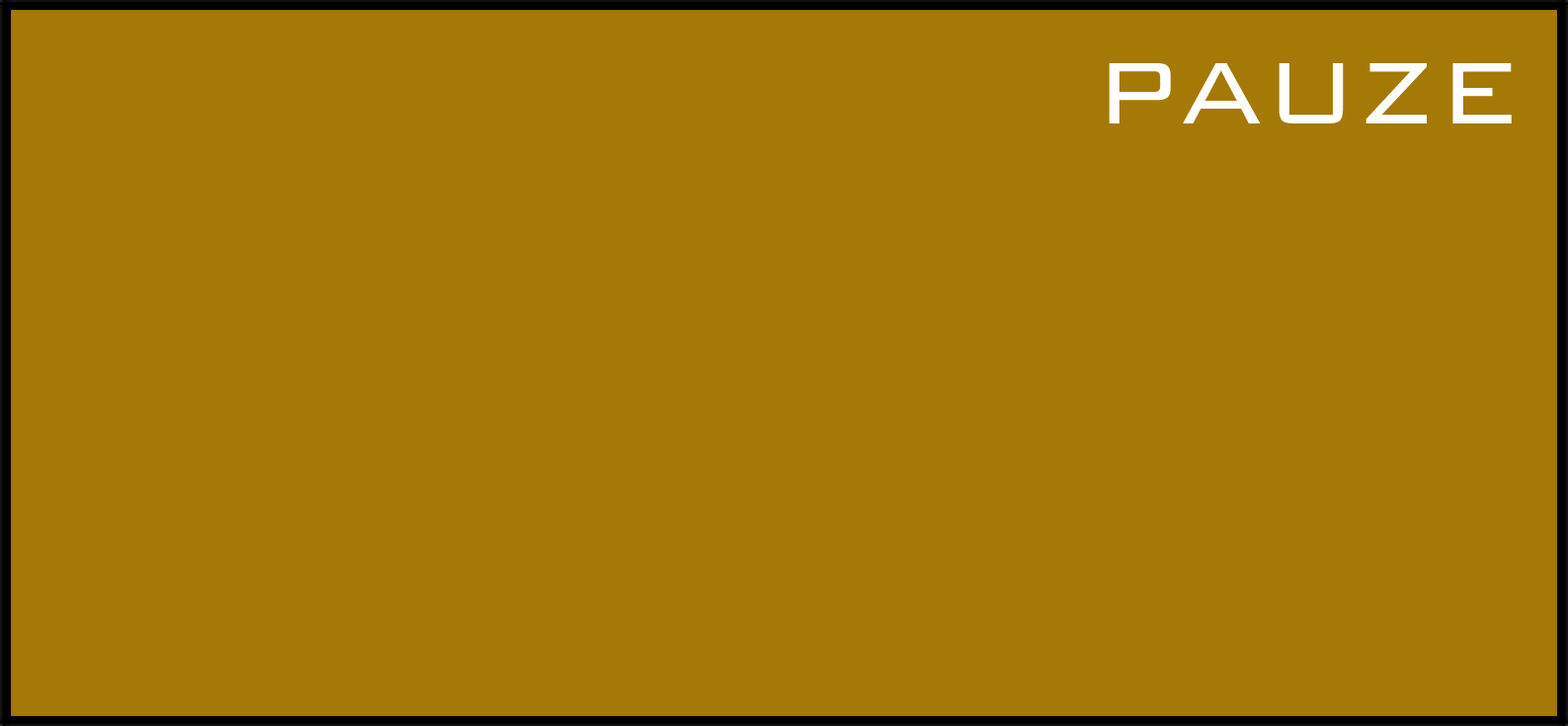
<style>
.page{position:relative;width:1568px;height:726px;background:#a47905}
.page>*{position:absolute;margin:0}
.t1{font:116.1px "BankGothic-Light";color:#ffffff}
</style>
<div class="page">
<p class="t1" style="left:1109px;top:63px;width:403px;height:61px">PAUZE</p>
</div>
